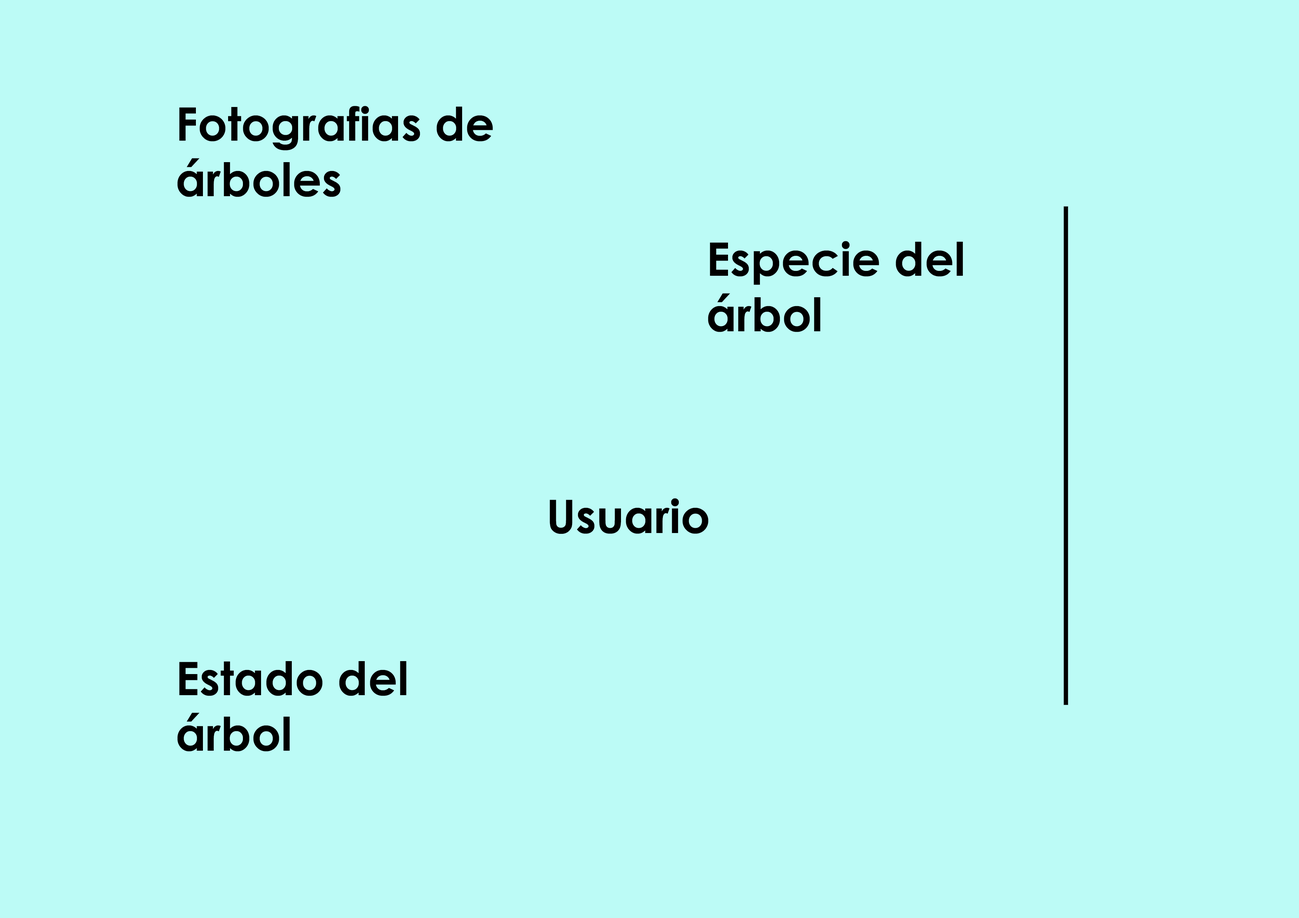
<style>
.page{position:relative;width:1299px;height:918px;background:#bcfbf6}
.page>*{position:absolute;margin:0}
.t1{font:46.3px "CenturyGothic-Bold";color:#000000}
</style>
<div class="page">
<p class="t1" style="left:177px;top:106px;width:316px;height:91px">Fotografias de árboles</p>
<p class="t1" style="left:708px;top:241px;width:255px;height:91px">Especie del árbol</p>
<p class="t1" style="left:549px;top:498px;width:159px;height:36px">Usuario</p>
<p class="t1" style="left:177px;top:661px;width:230px;height:91px">Estado del árbol</p>
</div>
